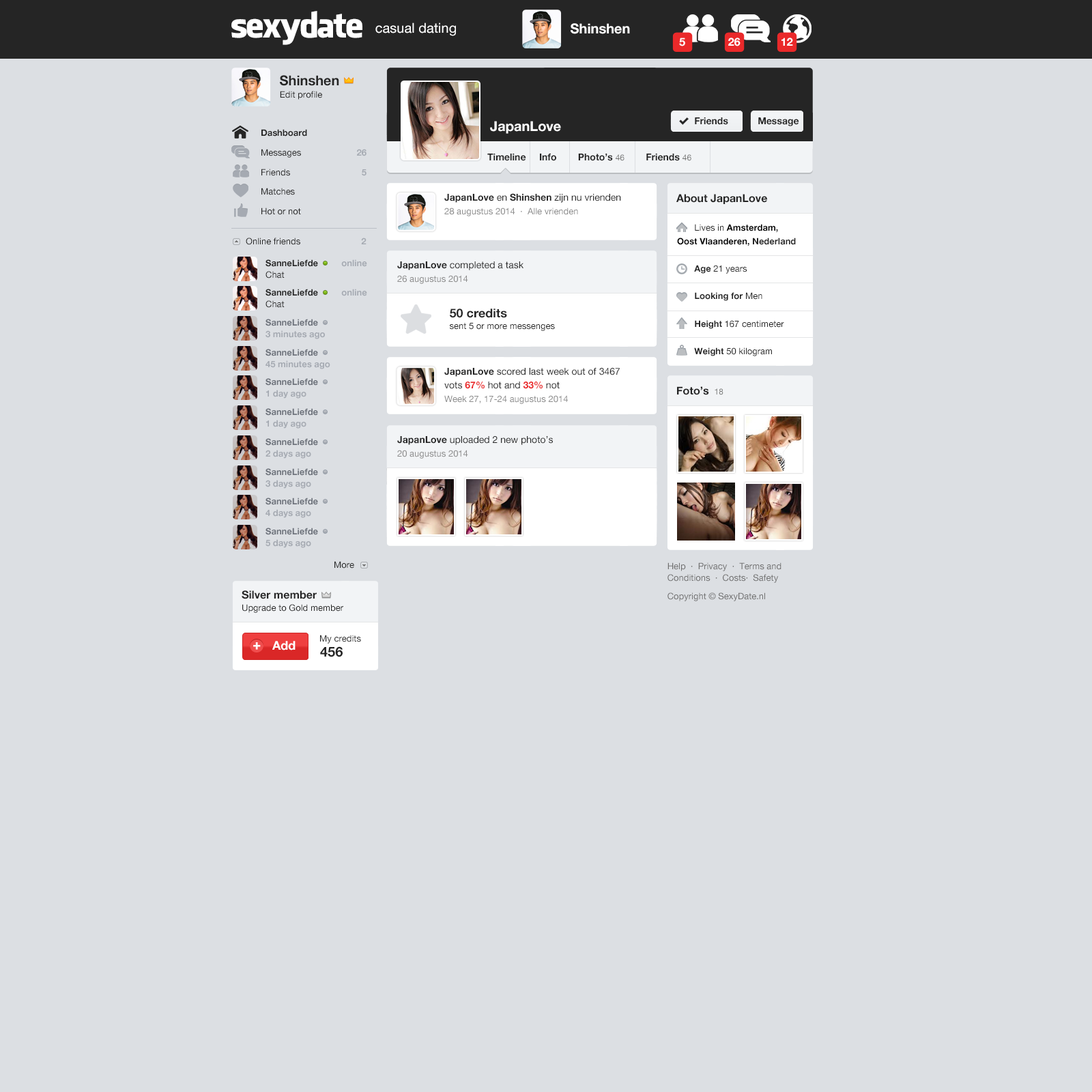
<style>
.page{position:relative;width:1092px;height:1092px;background:#dcdfe3}
.page>*{position:absolute;margin:0}
.t1{font:34.1px "FacebookLetterFaces";letter-spacing:-0.05em;color:#ffffff}
.t2{font:13.6px "HelveticaNeue";color:#ffffff}
.t3{font:13.6px "HelveticaNeue-Bold";color:#ffffff}
.t4{font:10.9px "HelveticaNeue-Bold";color:#ffffff}
.t5{font:13.6px "HelveticaNeue-Bold";color:#252525}
.t6{font:8.9px "HelveticaNeue";color:#252525}
.t7{font:9.6px "HelveticaNeue-Bold";color:#252525}
.t8{font:8.9px/19.7px "HelveticaNeue";color:#252525}
.t9{font:8.9px/19.7px "HelveticaNeue-Bold";color:#252525}
.t10{font:8.9px/19.7px "HelveticaNeue-Bold";color:#a5aab2}
.t11{font:8.2px "HelveticaNeue";color:#737373}
.t12{font:9.6px/13.6px "HelveticaNeue";color:#252525}
.t13{font:9.6px/13.6px "HelveticaNeue-Bold";color:#252525}
.t14{font:8.9px/13.6px "HelveticaNeue";color:#8b8b8b}
.t15{font:8.9px/11.6px "HelveticaNeue";color:#8b8b8b}
.t16{font:10.9px "HelveticaNeue-Bold";color:#252525}
.t17{font:8.9px/13.6px "HelveticaNeue-Bold";color:#000000}
.t18{font:8.9px/13.6px "HelveticaNeue";color:#252525}
.t19{font:8.9px/13.6px "HelveticaNeue-Bold";color:#252525}
.t20{font:8.9px/13.7px "HelveticaNeue-Bold";color:#252525}
.t21{font:8.9px/13.7px "HelveticaNeue";color:#252525}
.t22{font:8.9px "HelveticaNeue-Bold";color:#a5aab2}
.t23{font:8.9px/11.6px "HelveticaNeue-Bold";color:#252525}
.t24{font:8.9px/11.6px "HelveticaNeue-Bold";color:#a5aab2}
.t25{font:8.9px/11.6px "HelveticaNeue";color:#252525}
.t26{font:12.3px/11.6px "HelveticaNeue-Bold";color:#252525}
.t27{font:8.9px/11.6px "HelveticaNeue-Bold";color:#6d727b}
.t28{font:9.6px/13.6px "HelveticaNeue-Bold";color:#ea292a}
.t29{font:8.9px/11.6px "HelveticaNeue";color:#707070}
.t30{font:8.9px/18.4px "HelveticaNeue";color:#707070}
.t31{font:12.3px "HelveticaNeue-Bold";color:#ffffff}
.t32{font:13px "HelveticaNeue-Bold";color:#ffffff;font-weight:bold}
</style>
<div class="page">
<p class="t1" style="left:231px;top:11px;width:131px;height:34px">sexydate</p>
<p class="t2" style="left:375px;top:23px;width:81px;height:13px">casual dating</p>
<p class="t3" style="left:571px;top:23px;width:59px;height:11px">Shinshen</p>
<p class="t4" style="left:679px;top:38px;width:6px;height:8px">5</p>
<p class="t4" style="left:728px;top:38px;width:13px;height:8px">26</p>
<p class="t4" style="left:781px;top:38px;width:12px;height:8px">12</p>
<p class="t5" style="left:280px;top:75px;width:59px;height:11px">Shinshen</p>
<p class="t6" style="left:280px;top:91px;width:42px;height:9px">Edit profile</p>
<p class="t3" style="left:490px;top:121px;width:71px;height:13px">JapanLove</p>
<p class="t7" style="left:695px;top:117px;width:33px;height:8px">Friends</p>
<p class="t7" style="left:758px;top:117px;width:41px;height:9px">Message</p>
<p class="t8" style="left:261px;top:129px;width:46px;height:86px"><span class="t9">Dashboard<br></span>Messages<br>Friends<br>Matches<br>Hot or not</p>
<p class="t10" style="left:357px;top:149px;width:9px;height:27px;text-align:right">26<br>5</p>
<p class="t7" style="left:487px;top:154px;width:204px;height:7px">Timeline     Info        Photo’s <span class="t11">46</span>        Friends <span class="t11">46</span></p>
<p class="t12" style="left:444px;top:193px;width:177px;height:23px"><span class="t13">JapanLove</span> en <span class="t13">Shinshen </span>zijn nu vrienden<br><span class="t14">28 augustus 2014</span><span class="t15">  ·  Alle vrienden</span></p>
<p class="t16" style="left:676px;top:194px;width:91px;height:10px">About JapanLove</p>
<p class="t17" style="left:677px;top:224px;width:119px;height:132px"><span class="t18">       Lives in </span>Amsterdam<span class="t19">,<br></span>Oost Vlaanderen<span class="t19">, Nederland<br><br>       </span><span class="t20">Age </span><span class="t21">21 years<br><br>       </span><span class="t20">Looking for</span><span class="t21"> Men<br><br>       </span><span class="t20">Height </span><span class="t21">167 centimeter<br><br>       </span><span class="t20">Weight </span><span class="t21">50 kilogram</span></p>
<p class="t6" style="left:246px;top:238px;width:120px;height:7px">Online friends      <span class="t22">2</span></p>
<p class="t23" style="left:265px;top:259px;width:102px;height:19px">SanneLiefde          <span class="t24">online<br></span><span class="t25">Chat</span></p>
<p class="t12" style="left:397px;top:261px;width:126px;height:23px"><span class="t13">JapanLove</span> completed a task<br><span class="t14">26 augustus 2014</span></p>
<p class="t23" style="left:265px;top:289px;width:102px;height:19px">SanneLiefde          <span class="t24">online<br></span><span class="t25">Chat</span></p>
<p class="t25" style="left:450px;top:308px;width:105px;height:23px"><span class="t26">50 credits<br></span>sent 5 or more messenges</p>
<p class="t24" style="left:265px;top:319px;width:60px;height:20px"><span class="t27">SanneLiefde<br></span>3 minutes ago</p>
<p class="t24" style="left:265px;top:349px;width:65px;height:20px"><span class="t27">SanneLiefde<br></span>45 minutes ago</p>
<p class="t12" style="left:444px;top:368px;width:176px;height:36px"><span class="t13">JapanLove</span> scored last week out of 3467 <br>vots <span class="t28">67%</span> hot and <span class="t28">33%</span> not<br><span class="t14">Week 27, 17-24 augustus 2014</span></p>
<p class="t27" style="left:265px;top:378px;width:53px;height:21px">SanneLiefde<br><span class="t24">1 day ago</span></p>
<p class="t16" style="left:677px;top:386px;width:46px;height:9px">Foto’s  <span class="t11">18</span></p>
<p class="t27" style="left:265px;top:408px;width:53px;height:21px">SanneLiefde<br><span class="t24">1 day ago</span></p>
<p class="t12" style="left:397px;top:436px;width:156px;height:23px"><span class="t13">JapanLove</span> uploaded 2 new photo’s<br><span class="t14">20 augustus 2014</span></p>
<p class="t27" style="left:265px;top:438px;width:53px;height:21px">SanneLiefde<br><span class="t24">2 days ago</span></p>
<p class="t27" style="left:265px;top:468px;width:53px;height:21px">SanneLiefde<br><span class="t24">3 days ago</span></p>
<p class="t27" style="left:265px;top:498px;width:53px;height:20px">SanneLiefde<br><span class="t24">4 days ago</span></p>
<p class="t27" style="left:265px;top:528px;width:53px;height:20px">SanneLiefde<br><span class="t24">5 days ago</span></p>
<p class="t6" style="left:334px;top:561px;width:20px;height:8px">More</p>
<p class="t29" style="left:667px;top:562px;width:114px;height:39px">Help  ·  Privacy  ·  Terms and<br>Conditions  ·  Costs·  Safety<br><span class="t30">Copyright © SexyDate.nl</span></p>
<p class="t16" style="left:242px;top:590px;width:75px;height:9px">Silver member</p>
<p class="t6" style="left:242px;top:604px;width:101px;height:9px">Upgrade to Gold member</p>
<p class="t31" style="left:272px;top:641px;width:24px;height:9px">Add</p>
<p class="t6" style="left:320px;top:635px;width:41px;height:9px">My credits</p>
<p class="t32" style="left:253px;top:642px;width:8px;height:8px">+</p>
<p class="t5" style="left:320px;top:646px;width:23px;height:11px">456</p>
</div>
